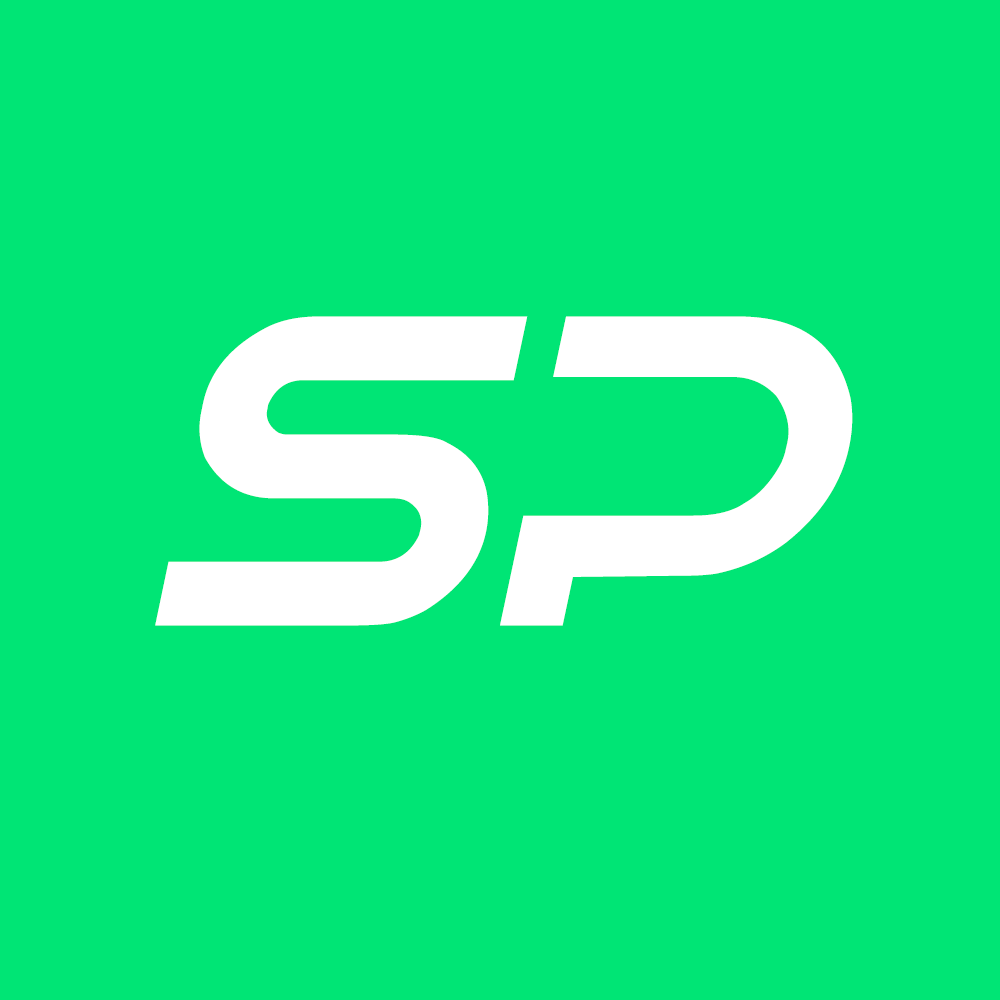
<style>
.page{position:relative;width:1000px;height:1000px;background:#00e575}
.page>*{position:absolute;margin:0}
.t1{font:439.1px "Android-Italic";letter-spacing:0.005em;color:#ffffff}
</style>
<div class="page">
<p class="t1" style="left:155px;top:316px;width:698px;height:310px">SP</p>
</div>
